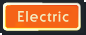
<style>
.page{position:relative;width:86px;height:35px;background:#f56317}
.page>*{position:absolute;margin:0}
.t1{font:15px "SerifGothicBQ-Bold";letter-spacing:0.07em;color:#f3f0bf}
</style>
<div class="page">
<p class="t1" style="left:18px;top:11px;width:51px;height:11px">Electric</p>
</div>
